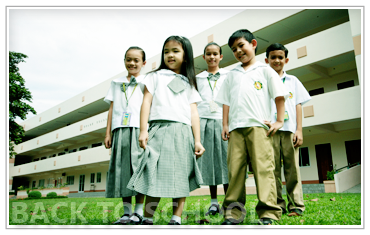
<style>
.page{position:relative;width:370px;height:235px}
.page>*{position:absolute;margin:0}
.t1{font:30px "SegoeUI-Bold"}
</style>
<div class="page">
<p class="t1" style="left:12px;top:202px;width:251px;height:21px">BACK TO SCHOOL</p>
</div>
